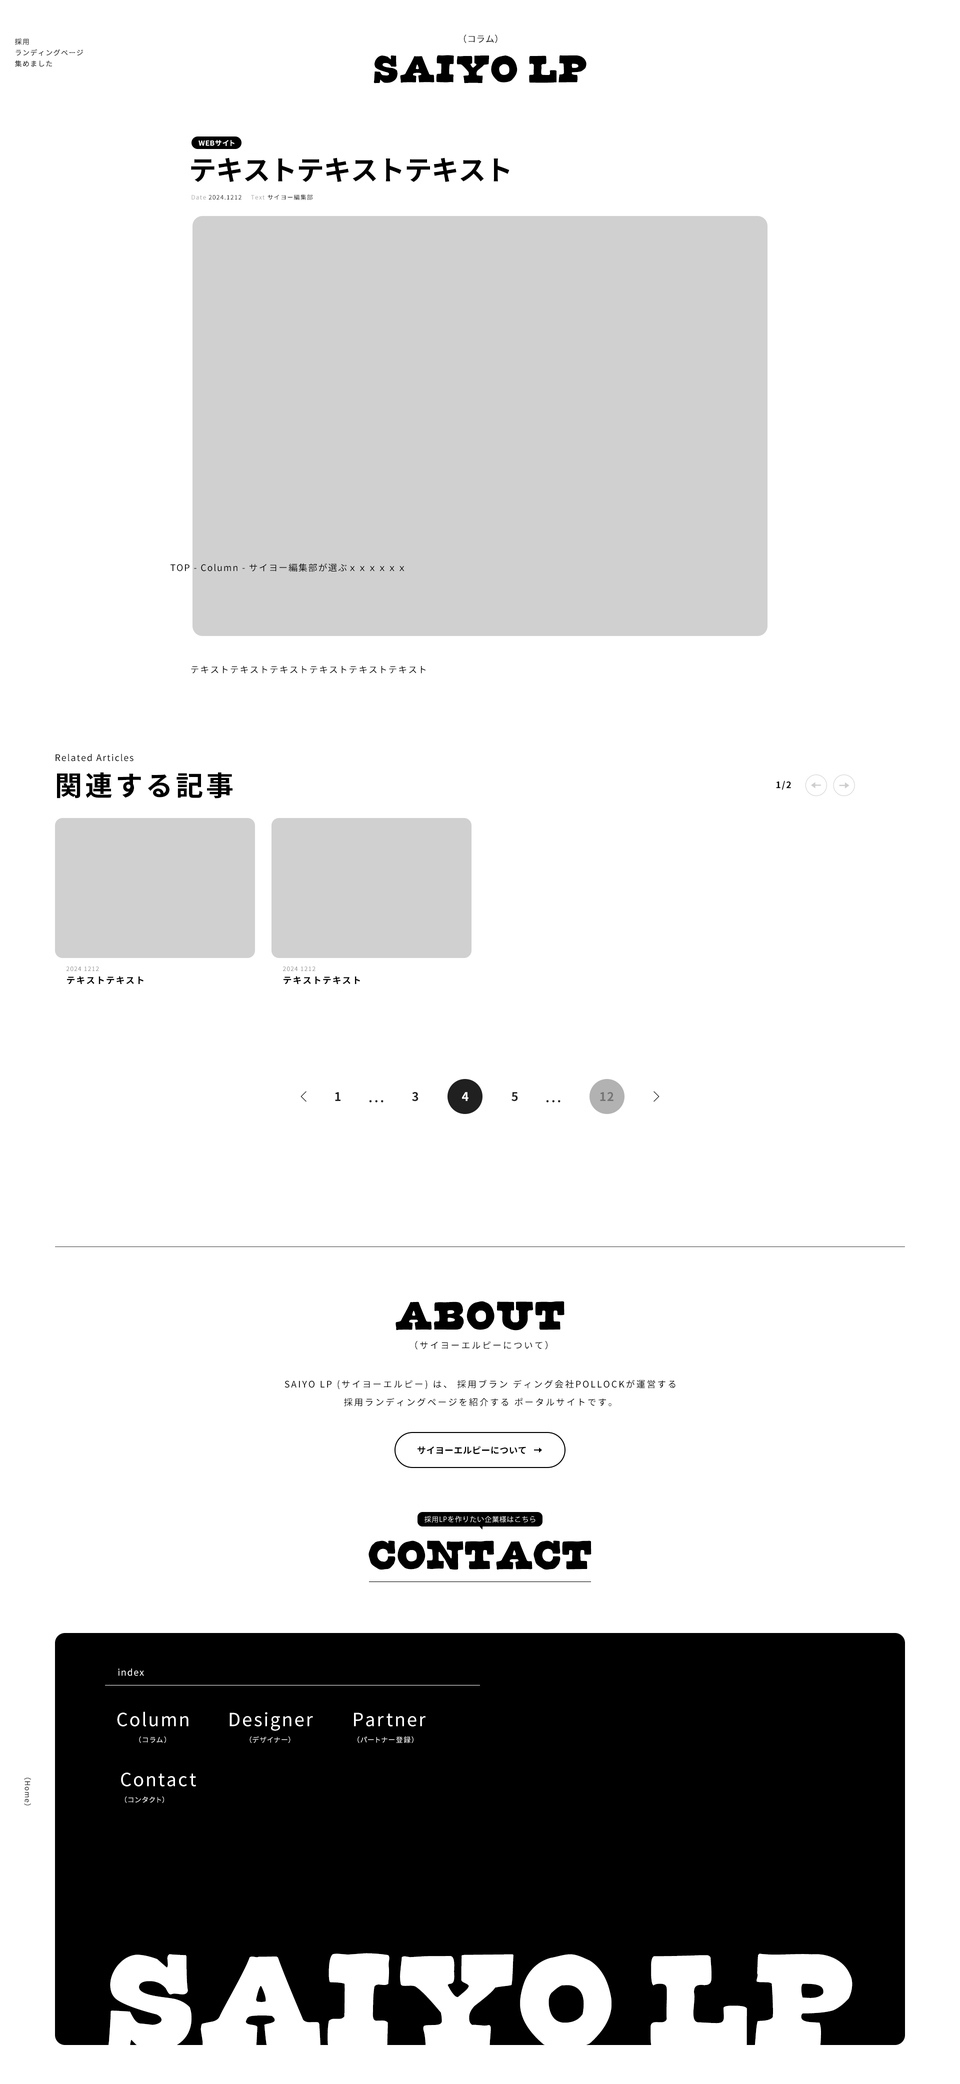
<style>
.page{position:relative;width:960px;height:2084px;background:#ffffff}
.page>*{position:absolute;margin:0}
.t1{font:7px/11px "NotoSansCJKjp-Regular";letter-spacing:0.1em;color:#404040}
.t2{font:9px/13px "NotoSansCJKjp-Regular";letter-spacing:0.02em;color:#000000}
.t3{font:42.5px/13px "CornDog";letter-spacing:0.02em;color:#000000}
.t4{font:42.5px/13px "CornDog";letter-spacing:-0.22em;color:#000000}
.t5{font:7px "NotoSansCJKjp-Bold";letter-spacing:0.04em;color:#ffffff}
.t6{font:7px "NotoSansCJKjp-Bold";letter-spacing:0.06em;color:#ffffff}
.t7{font:7px "NotoSansCJKjp-Bold";letter-spacing:-0.12em;color:#ffffff}
.t8{font:27.5px "NotoSansCJKjp-Bold";letter-spacing:-0.02em;color:#000000}
.t9{font:6px "NotoSansCJKjp-Regular";letter-spacing:0.1em;color:#000000}
.t10{font:6px "NotoSansCJKjp-Regular";letter-spacing:0.1em;color:#a4a4a4}
.t11{font:9px "NotoSansCJKjp-Regular";letter-spacing:0.1em;color:#000000}
.t12{font:9px/18.5px "NotoSansCJKjp-Regular";letter-spacing:0.1em;color:#000000}
.t13{font:27.5px/18.5px "NotoSansCJKjp-Bold";letter-spacing:0.1em;color:#000000}
.t14{font:9px "NotoSansCJKjp-Bold";letter-spacing:0.1em;color:#000000}
.t15{font:6px/10px "NotoSansCJKjp-Regular";letter-spacing:0.1em;color:#898989}
.t16{font:9px/10px "NotoSansCJKjp-Bold";letter-spacing:0.1em;color:#000000}
.t17{font:12px "NotoSansCJKjp-Bold";letter-spacing:0.16em;color:#202020}
.t18{font:12px "NotoSansCJKjp-Bold";letter-spacing:0.16em;color:#ffffff}
.t19{font:12px "NotoSansCJKjp-Bold";letter-spacing:0.06em;color:#747474}
.t20{font:9px/48px "NotoSansCJKjp-Regular";letter-spacing:0.16em;color:#000000}
.t21{font:45px/48px "CornDog";letter-spacing:0.02em;color:#000000}
.t22{font:9px/18px "NotoSansCJKjp-Regular";letter-spacing:0.16em;color:#000000}
.t23{font:9px "NotoSansCJKjp-Bold";letter-spacing:0.02em;color:#000000}
.t24{font:7px "KozGoPr6N-Regular";letter-spacing:0.06em;color:#ffffff}
.t25{font:45px "CornDog";color:#000000}
.t26{font:9px "NotoSansCJKjp-Regular";letter-spacing:0.1em;color:#ffffff}
.t27{font:18px/26px "NotoSansCJKjp-Regular";letter-spacing:0.1em;color:#ffffff}
.t28{font:7px/3px "NotoSansCJKjp-Regular";letter-spacing:0.14em;color:#ffffff}
.t29{font:7px/3px "NotoSansCJKjp-Regular";letter-spacing:0.1em;color:#ffffff}
.t30{font:7px "NotoSansCJKjp-Regular";letter-spacing:0.1em;color:#404040}
.t31{font:149.4px "CornDog";letter-spacing:0.02em;color:#ffffff}
.t32{font:149.4px "CornDog";letter-spacing:-0.24em;color:#ffffff}
</style>
<div class="page">
<p class="t1" style="left:15px;top:38px;width:68px;height:29px">採用<br>ランディングページ<br>集めました</p>
<p class="t2" style="left:374px;top:34px;width:212px;height:50px;text-align:center">（コラム）<br><span class="t3">SAIY</span><span class="t4">O</span><span class="t3"> LP</span></p>
<p class="t5" style="left:198px;top:140px;width:36px;height:6px">WEB<span class="t6">サ</span><span class="t7">イト</span></p>
<p class="t8" style="left:191px;top:158px;width:319px;height:24px">テキストテキストテキスト</p>
<p class="t9" style="left:192px;top:194px;width:121px;height:6px"><span class="t10">Date</span> 2024.1212 　<span class="t10">Text</span> サイヨー編集部</p>
<p class="t11" style="left:170px;top:563px;width:234px;height:9px">TOP - Column - サイヨー編集部が選ぶｘｘｘｘｘｘ</p>
<p class="t11" style="left:191px;top:666px;width:235px;height:8px">テキストテキストテキストテキストテキストテキスト</p>
<p class="t12" style="left:56px;top:754px;width:176px;height:44px">Related Articles<br><span class="t13">関連する記事</span></p>
<p class="t14" style="left:776px;top:780px;width:15px;height:10px">1/2</p>
<p class="t15" style="left:66px;top:966px;width:78px;height:18px">2024 1212<br><span class="t16">テキストテキスト</span></p>
<p class="t15" style="left:283px;top:966px;width:77px;height:18px">2024 1212<br><span class="t16">テキストテキスト</span></p>
<p class="t17" style="left:335px;top:1092px;width:5px;height:9px">1</p>
<p class="t17" style="left:412px;top:1092px;width:6px;height:10px">3</p>
<p class="t18" style="left:462px;top:1092px;width:6px;height:9px">4</p>
<p class="t17" style="left:512px;top:1092px;width:6px;height:10px">5</p>
<p class="t19" style="left:600px;top:1092px;width:14px;height:9px">12</p>
<p class="t17" style="left:369px;top:1100px;width:15px;height:2px">...</p>
<p class="t17" style="left:546px;top:1100px;width:14px;height:2px">...</p>
<p class="t20" style="left:396px;top:1301px;width:168px;height:49px;text-align:center"><span class="t21">ABOUT<br></span>（サイヨーエルピーについて）</p>
<p class="t22" style="left:284px;top:1380px;width:392px;height:26px;text-align:center">SAIYO LP (サイヨーエルピー) は、 採用ブラン ディング会社POLLOCKが運営する<br>採用ランディングページを紹介する ポータルサイトです。</p>
<p class="t23" style="left:418px;top:1446px;width:108px;height:8px">サイヨーエルピーについて</p>
<p class="t24" style="left:424px;top:1516px;width:112px;height:7px">採用LPを作りたい企業様はこちら</p>
<p class="t25" style="left:368px;top:1540px;width:224px;height:30px">CONTACT</p>
<p class="t26" style="left:118px;top:1668px;width:26px;height:8px">index</p>
<p class="t27" style="left:117px;top:1712px;width:71px;height:31px;text-align:center">Column<br><span class="t28">（コラム）</span></p>
<p class="t27" style="left:230px;top:1712px;width:83px;height:31px;text-align:center">Designer<br><span class="t29">（デザイナー）</span></p>
<p class="t29" style="left:354px;top:1712px;width:72px;height:31px;text-align:center"><span class="t27"> Partner<br></span>（パートナー登録）</p>
<p class="t30" style="left:24px;top:1778px;width:7px;height:28px;rotate:90deg">（Home）</p>
<p class="t27" style="left:121px;top:1772px;width:75px;height:31px">Contact<br><span class="t29">（コンタクト）</span></p>
<p class="t31" style="left:108px;top:1953px;width:744px;height:99px">SAIY<span class="t32">O</span> LP</p>
</div>
